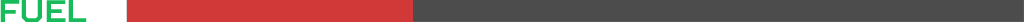
<style>
.page{position:relative;width:1024px;height:22px;background:#4c4c4c}
.page>*{position:absolute;margin:0}
.t1{font:31px "SquaresBold";letter-spacing:-0.025em;color:#17bb59}
</style>
<div class="page">
<p class="t1" style="left:0px;top:0px;width:87px;height:22px">fuel</p>
</div>
